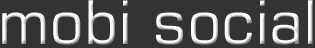
<style>
.page{position:relative;width:315px;height:48px;background:#333333}
.page>*{position:absolute;margin:0}
.t1{font:60px "Square721BT-Roman";color:#fdf9fa}
</style>
<div class="page">
<p class="t1" style="left:2px;top:0px;width:311px;height:45px">mobi social</p>
</div>
